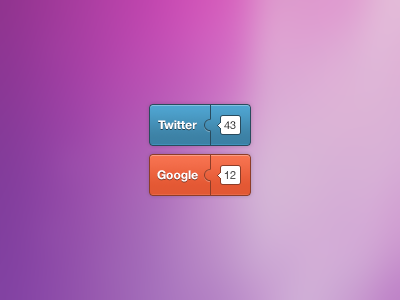
<style>
.page{position:relative;width:400px;height:300px}
.page>*{position:absolute;margin:0}
.t1{font:12px "HelveticaNeue-Bold";color:#ffffff}
.t2{font:11px "HelveticaNeue"}
.t3{font:11px "HelveticaNeue";color:#565656}
</style>
<div class="page">
<p class="t1" style="left:158px;top:120px;width:39px;height:10px">Twitter</p>
<p class="t2" style="left:224px;top:121px;width:12px;height:8px">43</p>
<p class="t1" style="left:157px;top:170px;width:41px;height:12px">Google</p>
<p class="t3" style="left:224px;top:171px;width:12px;height:8px">12</p>
</div>
